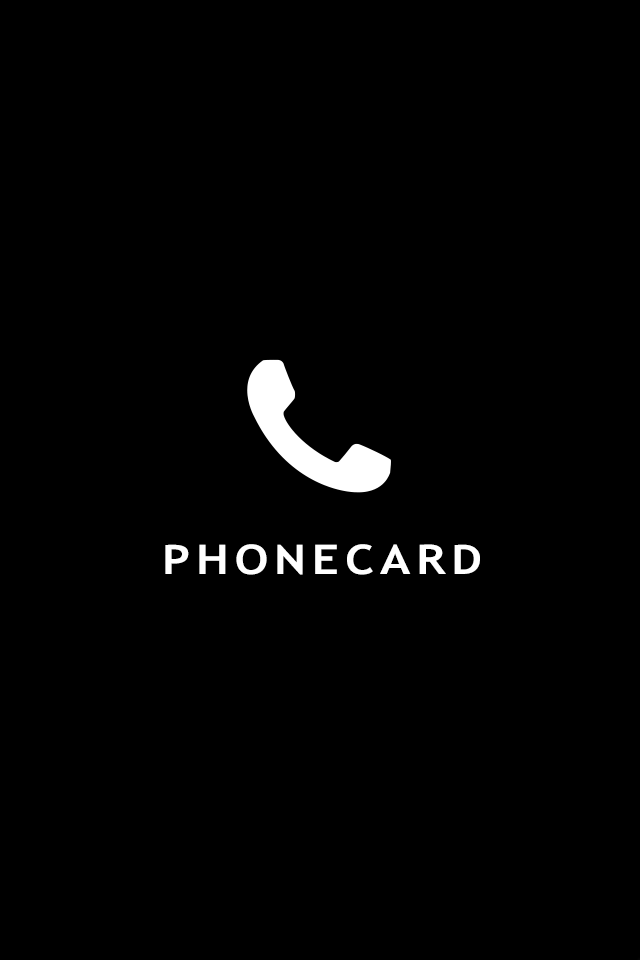
<style>
.page{position:relative;width:640px;height:960px;background:#000000}
.page>*{position:absolute;margin:0}
.t1{font:40.8px "TrebuchetMS-Bold";letter-spacing:0.12em;color:#ffffff;scale:1.18 1}
</style>
<div class="page">
<p class="t1" style="left:165px;top:544px;width:315px;height:31px">PHONECARD</p>
</div>
